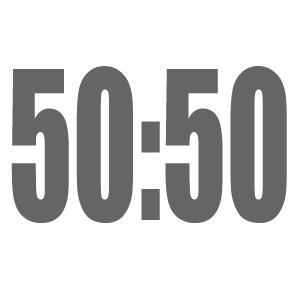
<style>
.page{position:relative;width:300px;height:300px;background:#ffffff}
.page>*{position:absolute;margin:0}
.t1{font:190.9px "Impact";color:#656565;scale:0.63 1}
</style>
<div class="page">
<p class="t1" style="left:11px;top:66px;width:276px;height:157px">50:50</p>
</div>
